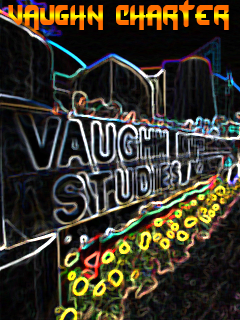
<style>
.page{position:relative;width:240px;height:320px}
.page>*{position:absolute;margin:0}
.t1{font:24.9px "Dafunk2";letter-spacing:0.01em;scale:0.9 1}
.t2{font:24.9px "Dafunk2";letter-spacing:0.02em;scale:0.9 1}
</style>
<div class="page">
<p class="t1" style="left:8px;top:0px;width:221px;height:30px"><span class="t2">Vaughn </span>Charter</p>
</div>
